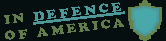
<style>
.page{position:relative;width:166px;height:41px;background:#060f0f}
.page>*{position:absolute;margin:0}
.t1{font:13.5px/16px "CooperBlack";letter-spacing:0.2em;color:#627c4b;text-transform:uppercase;scale:1.07 1}
.t2{font:13.5px/16px "CooperBlack";letter-spacing:0.2em;color:#4c9899;text-transform:uppercase;text-decoration:underline;scale:1.07 1}
</style>
<div class="page">
<p class="t1" style="left:4px;top:2px;width:121px;height:38px;text-align:center;rotate:-7deg">In <span class="t2">Defence<br></span>Of America</p>
</div>
